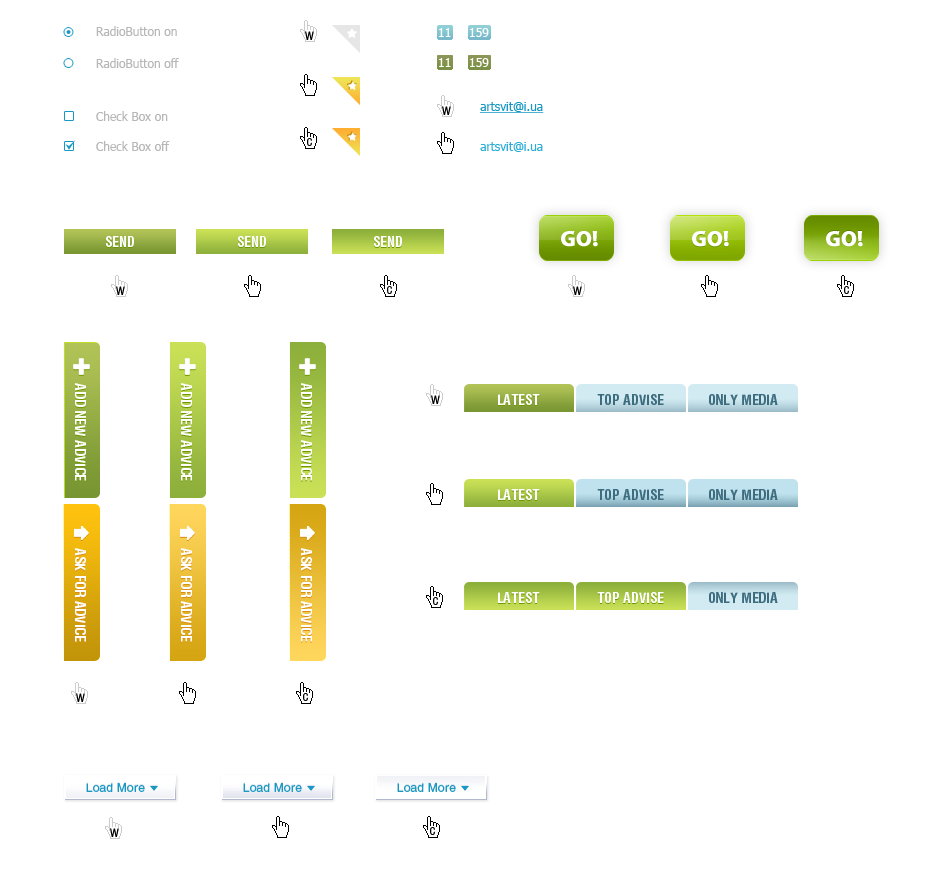
<style>
.page{position:relative;width:942px;height:889px;background:#ffffff}
.page>*{position:absolute;margin:0}
.t1{font:12px "Tahoma";color:#b7b7b7}
.t2{font:12px "Tahoma";color:#ffffff}
.t3{font:12px "Tahoma";color:#1898c3;text-decoration:underline}
.t4{font:12px "Tahoma";color:#2caed9}
.t5{font:22px "MyriadPro-Bold";color:#ffffff;font-weight:bold}
.t6{font:14px "HeliosCond-Bold";letter-spacing:0.01em;color:#ffffff;text-transform:uppercase}
.t7{font:14px "HeliosCond-Bold";letter-spacing:0.01em;color:#3d6c7e;text-transform:uppercase}
.t8{font:12px "Helios";letter-spacing:0.01em;color:#1898c3}
</style>
<div class="page">
<p class="t1" style="left:96px;top:26px;width:81px;height:10px">RadioButton on</p>
<p class="t2" style="left:439px;top:28px;width:12px;height:9px">11</p>
<p class="t2" style="left:470px;top:28px;width:19px;height:9px">159</p>
<p class="t1" style="left:96px;top:58px;width:83px;height:10px">RadioButton off</p>
<p class="t2" style="left:439px;top:58px;width:12px;height:9px">11</p>
<p class="t2" style="left:470px;top:58px;width:19px;height:9px">159</p>
<p class="t3" style="left:480px;top:102px;width:64px;height:11px">artsvit@i.ua</p>
<p class="t1" style="left:96px;top:111px;width:72px;height:10px">Check Box on</p>
<p class="t1" style="left:96px;top:141px;width:74px;height:10px">Check Box off</p>
<p class="t4" style="left:480px;top:142px;width:63px;height:10px">artsvit@i.ua</p>
<p class="t5" style="left:561px;top:231px;width:37px;height:16px">GO!</p>
<p class="t5" style="left:692px;top:231px;width:37px;height:16px">GO!</p>
<p class="t5" style="left:826px;top:231px;width:37px;height:16px">GO!</p>
<p class="t6" style="left:106px;top:236px;width:28px;height:11px">Send</p>
<p class="t6" style="left:238px;top:236px;width:28px;height:11px">Send</p>
<p class="t6" style="left:374px;top:236px;width:28px;height:11px">Send</p>
<p class="t6" style="left:75px;top:383px;width:11px;height:98px;rotate:90deg">ADD NEW ADVICE</p>
<p class="t6" style="left:181px;top:383px;width:11px;height:98px;rotate:90deg">ADD NEW ADVICE</p>
<p class="t6" style="left:301px;top:383px;width:11px;height:98px;rotate:90deg">ADD NEW ADVICE</p>
<p class="t6" style="left:498px;top:394px;width:42px;height:11px">latest</p>
<p class="t7" style="left:597px;top:394px;width:67px;height:11px">ТОР advise</p>
<p class="t7" style="left:709px;top:394px;width:69px;height:11px">Only media</p>
<p class="t6" style="left:498px;top:489px;width:42px;height:11px">latest</p>
<p class="t7" style="left:597px;top:489px;width:67px;height:11px">ТОР advise</p>
<p class="t7" style="left:709px;top:489px;width:69px;height:11px">Only media</p>
<p class="t6" style="left:75px;top:548px;width:11px;height:94px;rotate:90deg">ASK FOR ADVICE</p>
<p class="t6" style="left:181px;top:548px;width:11px;height:94px;rotate:90deg">ASK FOR ADVICE</p>
<p class="t6" style="left:301px;top:548px;width:11px;height:94px;rotate:90deg">ASK FOR ADVICE</p>
<p class="t6" style="left:498px;top:592px;width:42px;height:11px">latest</p>
<p class="t6" style="left:597px;top:592px;width:67px;height:11px">ТОР advise</p>
<p class="t7" style="left:709px;top:592px;width:69px;height:11px">Only media</p>
<p class="t8" style="left:86px;top:783px;width:59px;height:9px">Load More</p>
<p class="t8" style="left:243px;top:783px;width:59px;height:9px">Load More</p>
<p class="t8" style="left:397px;top:783px;width:59px;height:9px">Load More</p>
</div>
